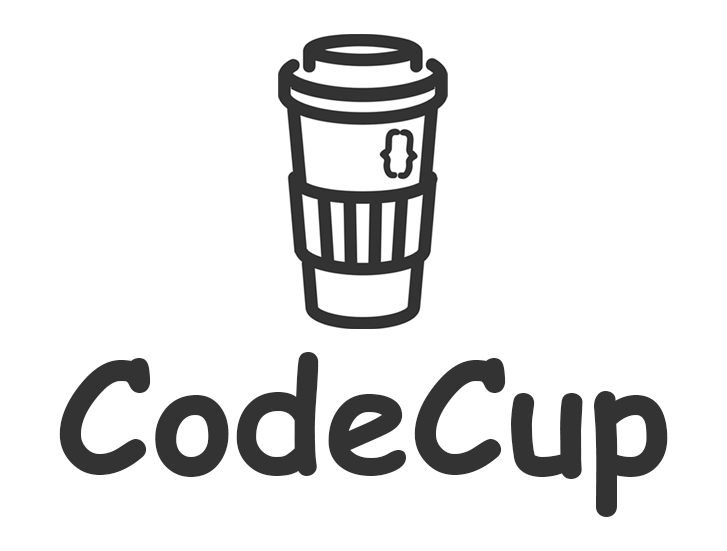
<style>
.page{position:relative;width:727px;height:551px;background:#ffffff}
.page>*{position:absolute;margin:0}
.t1{font:155.2px "ComicSansMS-Bold";color:#333333}
</style>
<div class="page">
<p class="t1" style="left:59px;top:352px;width:609px;height:165px">CodeCup</p>
</div>
